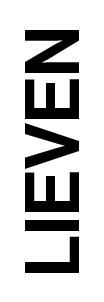
<style>
.page{position:relative;width:104px;height:302px;background:#ffffff}
.page>*{position:absolute;margin:0}
.t1{font:75px "NHaasGroteskDSPro-65Md";color:#000000}
</style>
<div class="page">
<p class="t1" style="left:25px;top:30px;width:54px;height:243px;rotate:-90deg">LIEVEN</p>
</div>
